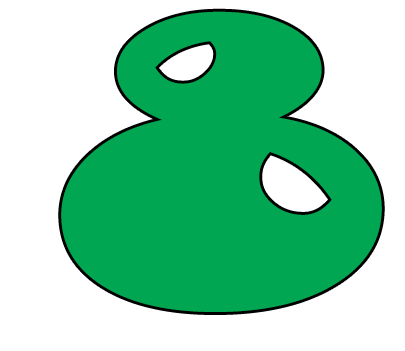
<style>
.page{position:relative;width:405px;height:351px;background:#ffffff}
.page>*{position:absolute;margin:0}
.t1{font:400px "SnapITC-Regular";color:#00a651}
</style>
<div class="page">
<p class="t1" style="left:61px;top:11px;width:321px;height:301px">8</p>
</div>
